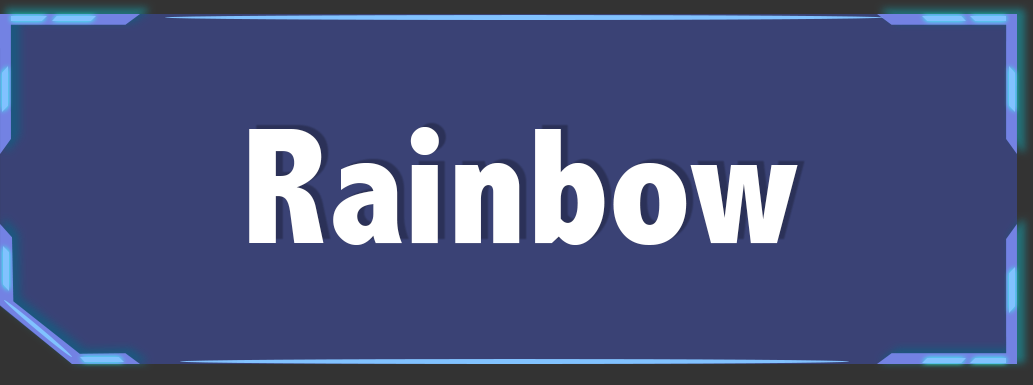
<style>
.page{position:relative;width:1033px;height:385px;background:#3a4275}
.page>*{position:absolute;margin:0}
.t1{font:167.3px "AbadiMT-CondensedExtraBold";color:#ffffff}
</style>
<div class="page">
<p class="t1" style="left:249px;top:127px;width:549px;height:118px">Rainbow</p>
</div>
